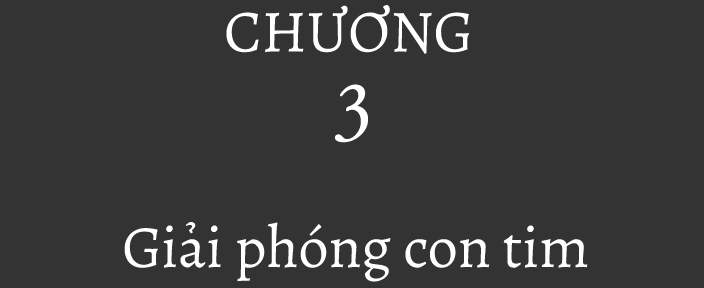
<style>
.page{position:relative;width:704px;height:288px;background:#333333}
.page>*{position:absolute;margin:0}
.t1{font:60px "Alegreya-Regular";color:#ffffff}
</style>
<div class="page">
<p class="t1" style="left:226px;top:5px;width:243px;height:49px">CHƯƠNG</p>
<p class="t1" style="left:124px;top:222px;width:464px;height:60px">Giải phóng con tim</p>
</div>
